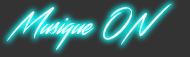
<style>
.page{position:relative;width:190px;height:57px;background:#333333}
.page>*{position:absolute;margin:0}
.t1{font:30px "Streamster";color:#ffffff}
</style>
<div class="page">
<p class="t1" style="left:7px;top:3px;width:165px;height:47px">Musique ON</p>
</div>
